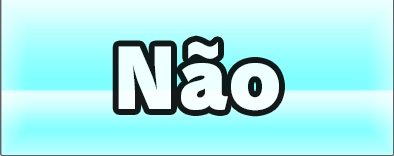
<style>
.page{position:relative;width:394px;height:156px}
.page>*{position:absolute;margin:0}
.t1{font:80px "RodinPro-UB";color:#ffffff}
</style>
<div class="page">
<p class="t1" style="left:118px;top:41px;width:161px;height:70px">Não</p>
</div>
